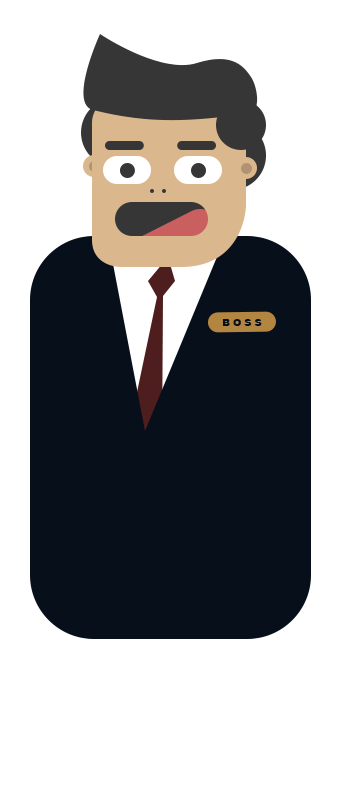
<style>
.page{position:relative;width:338px;height:793px;background:#ffffff}
.page>*{position:absolute;margin:0}
.t1{font:10px "Arial-Black";letter-spacing:0.3em;color:#070f1b}
</style>
<div class="page">
<p class="t1" style="left:222px;top:319px;width:40px;height:7px">BOSS</p>
</div>
